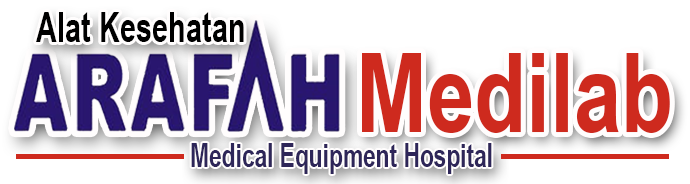
<style>
.page{position:relative;width:690px;height:184px;background:#ffffff}
.page>*{position:absolute;margin:0}
.t1{font:42.1px "ArialNarrow-Bold";color:#000000;scale:0.84 1}
.t2{font:109.9px "ArialNarrow-Bold";color:#ce2a1e;scale:0.94 1}
.t3{font:32.6px "ArialNarrow-Bold";color:#2e2659;scale:0.85 1}
</style>
<div class="page">
<p class="t1" style="left:36px;top:12px;width:208px;height:30px">Alat Kesehatan</p>
<p class="t2" style="left:362px;top:53px;width:308px;height:80px">Medilab</p>
<p class="t3" style="left:191px;top:143px;width:301px;height:31px">Medical Equipment Hospital</p>
</div>
